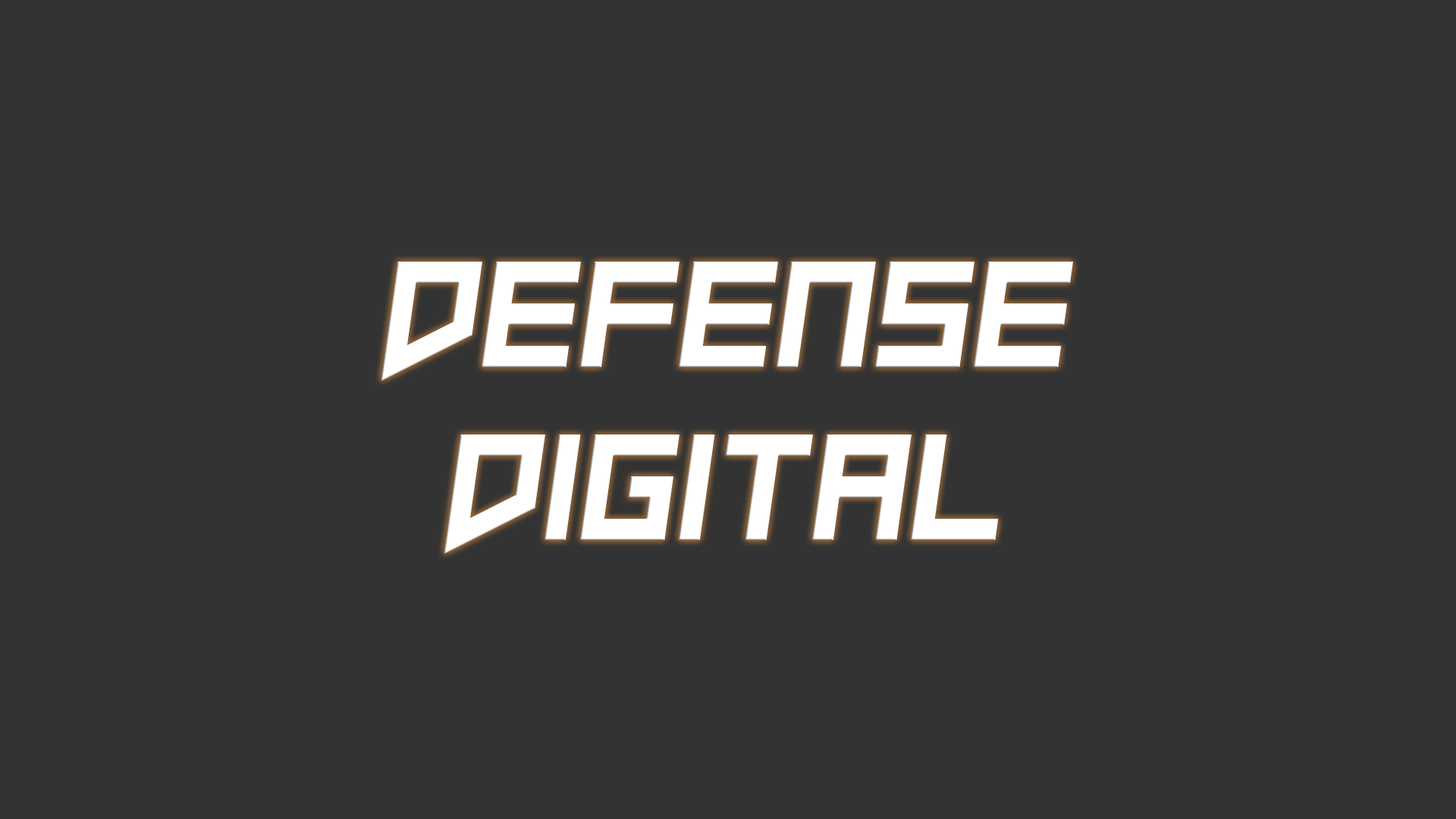
<style>
.page{position:relative;width:1456px;height:819px;background:#333333}
.page>*{position:absolute;margin:0}
.t1{font:144.1px "SlopeOpera";color:#ffffff}
</style>
<div class="page">
<p class="t1" style="left:381px;top:262px;width:692px;height:292px;text-align:center">defense digital</p>
</div>
